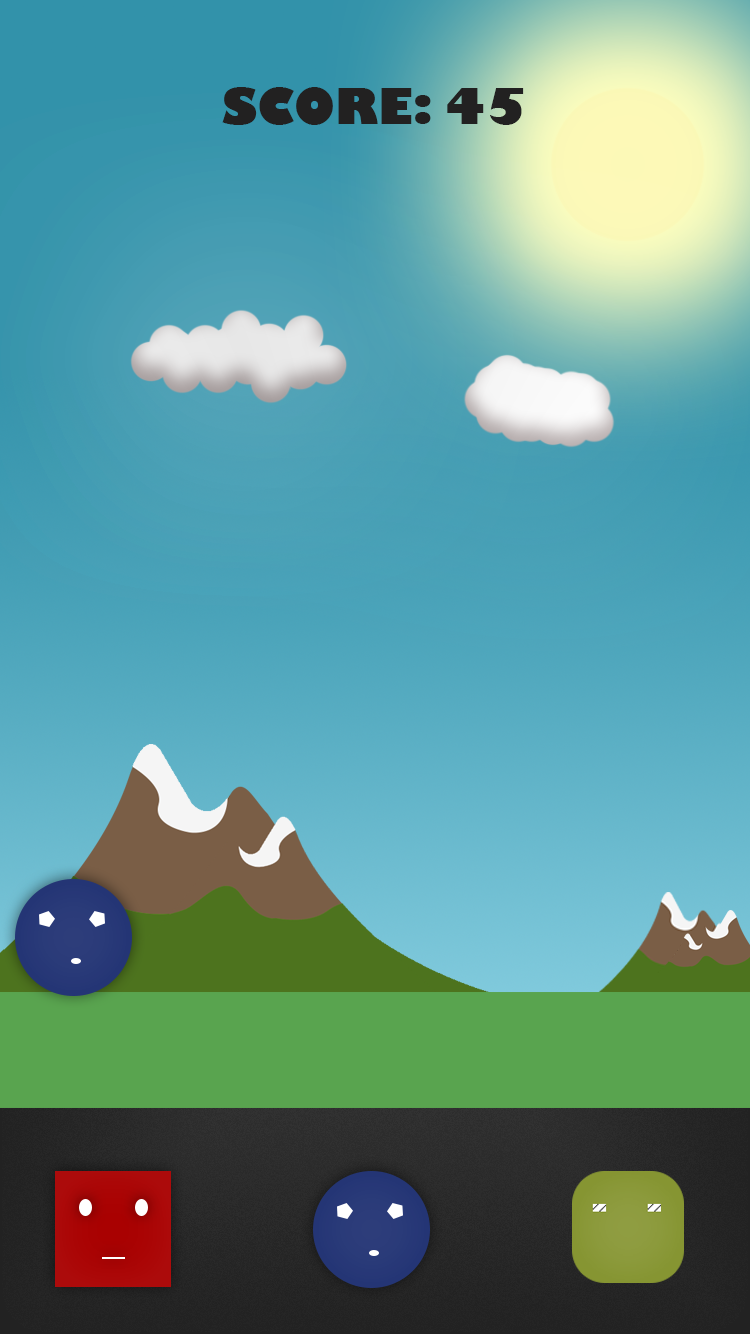
<style>
.page{position:relative;width:750px;height:1334px}
.page>*{position:absolute;margin:0}
.t1{font:48px "GillSans-UltraBold";color:#222121}
</style>
<div class="page">
<p class="t1" style="left:222px;top:87px;width:302px;height:38px">SCORE: 45</p>
</div>
